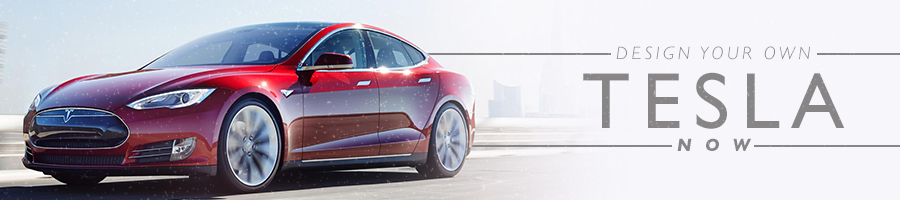
<style>
.page{position:relative;width:900px;height:200px;background:#f7f6fb}
.page>*{position:absolute;margin:0}
.t1{font:18.1px "GillSans-LightItalic";letter-spacing:0.2em;color:#878585;text-transform:uppercase}
.t2{font:79.9px "GillSans";letter-spacing:0.14em;color:#878585;text-transform:uppercase}
.t3{font:18.1px "GillSans-BoldItalic";letter-spacing:0.72em;color:#878585;text-transform:uppercase}
</style>
<div class="page">
<p class="t1" style="left:616px;top:46px;width:194px;height:14px">Design your own</p>
<p class="t2" style="left:583px;top:72px;width:262px;height:57px">TESLA</p>
<p class="t3" style="left:677px;top:138px;width:75px;height:13px">NOW</p>
</div>
